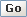
<style>
.page{position:relative;width:27px;height:17px}
.page>*{position:absolute;margin:0}
.t1{font:11px "Verdana-Bold";color:#333333}
</style>
<div class="page">
<p class="t1" style="left:6px;top:4px;width:15px;height:8px">Go</p>
</div>
